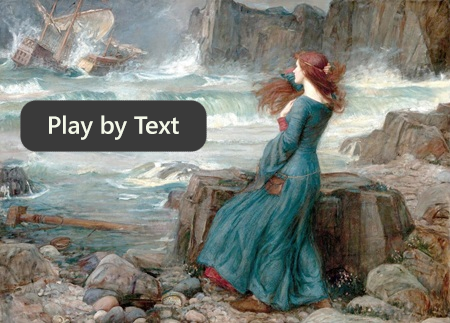
<style>
.page{position:relative;width:450px;height:323px}
.page>*{position:absolute;margin:0}
.t1{font:24.6px "SegoeUI-Semibold";color:#f4f8e9}
</style>
<div class="page">
<p class="t1" style="left:49px;top:115px;width:130px;height:25px">Play by Text</p>
</div>
